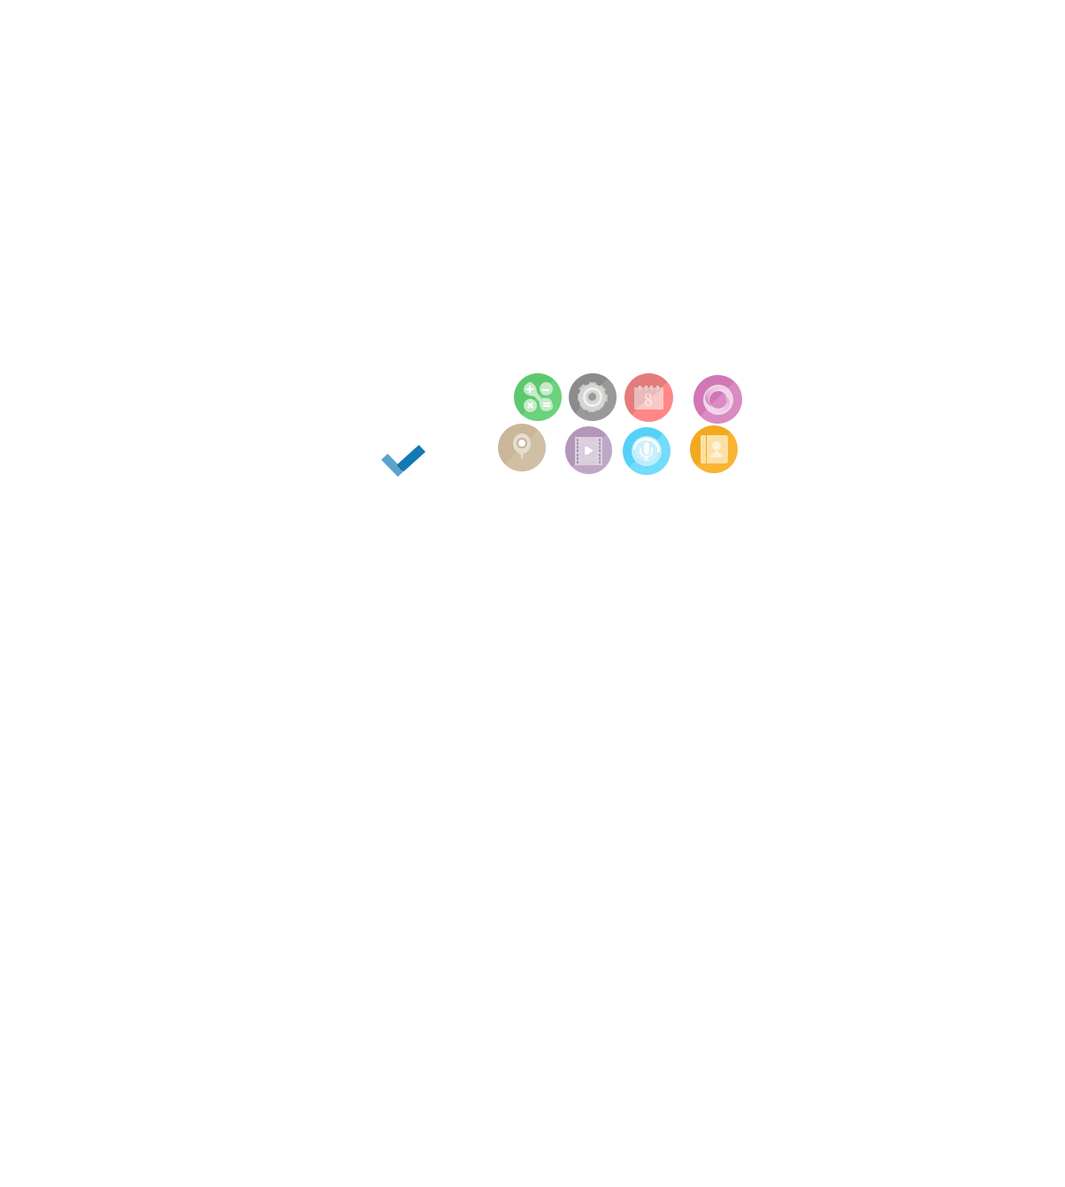
<style>
.page{position:relative;width:1065px;height:1187px;background:#ffffff}
.page>*{position:absolute;margin:0}
.t1{font:9px "BaskOldFace";color:#ffe3e3}
</style>
<div class="page">
<p class="t1" style="left:644px;top:393px;width:8px;height:13px">8</p>
</div>
